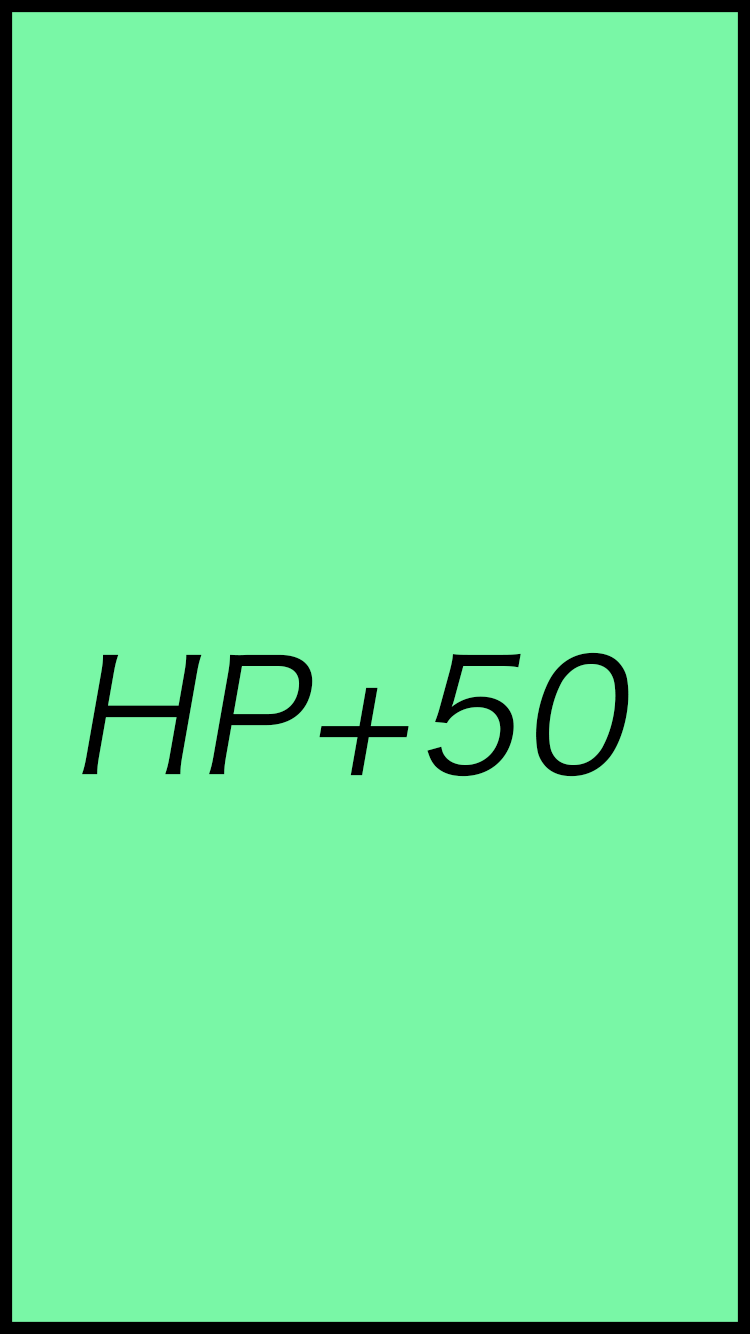
<style>
.page{position:relative;width:750px;height:1334px;background:#79f7a6}
.page>*{position:absolute;margin:0}
.t1{font:156.9px "HiraKakuPro-W3";color:#000000;font-weight:bold;font-style:italic}
</style>
<div class="page">
<p class="t1" style="left:82px;top:652px;width:547px;height:125px">HP+50</p>
</div>
